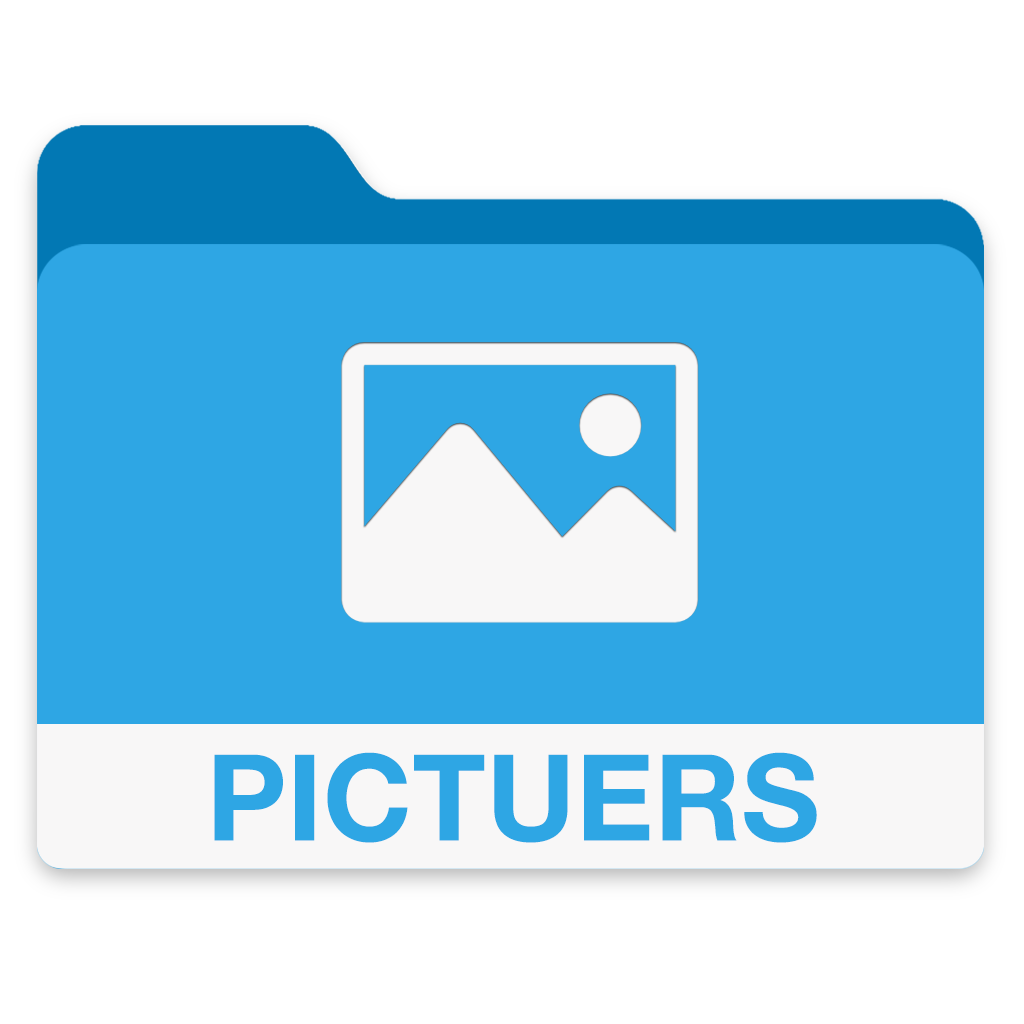
<style>
.page{position:relative;width:1024px;height:1024px;background:#2ea6e4}
.page>*{position:absolute;margin:0}
.t1{font:120px "HelveticaNeue-Bold";letter-spacing:0.005em;color:#2ea6e4}
</style>
<div class="page">
<p class="t1" style="left:214px;top:752px;width:603px;height:91px">PICTUERS</p>
</div>
